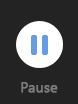
<style>
.page{position:relative;width:78px;height:104px;background:#232323}
.page>*{position:absolute;margin:0}
.t1{font:14px "SegoeUI";color:#7c7c7c;font-weight:bold}
</style>
<div class="page">
<p class="t1" style="left:21px;top:82px;width:37px;height:11px">Pause</p>
</div>
